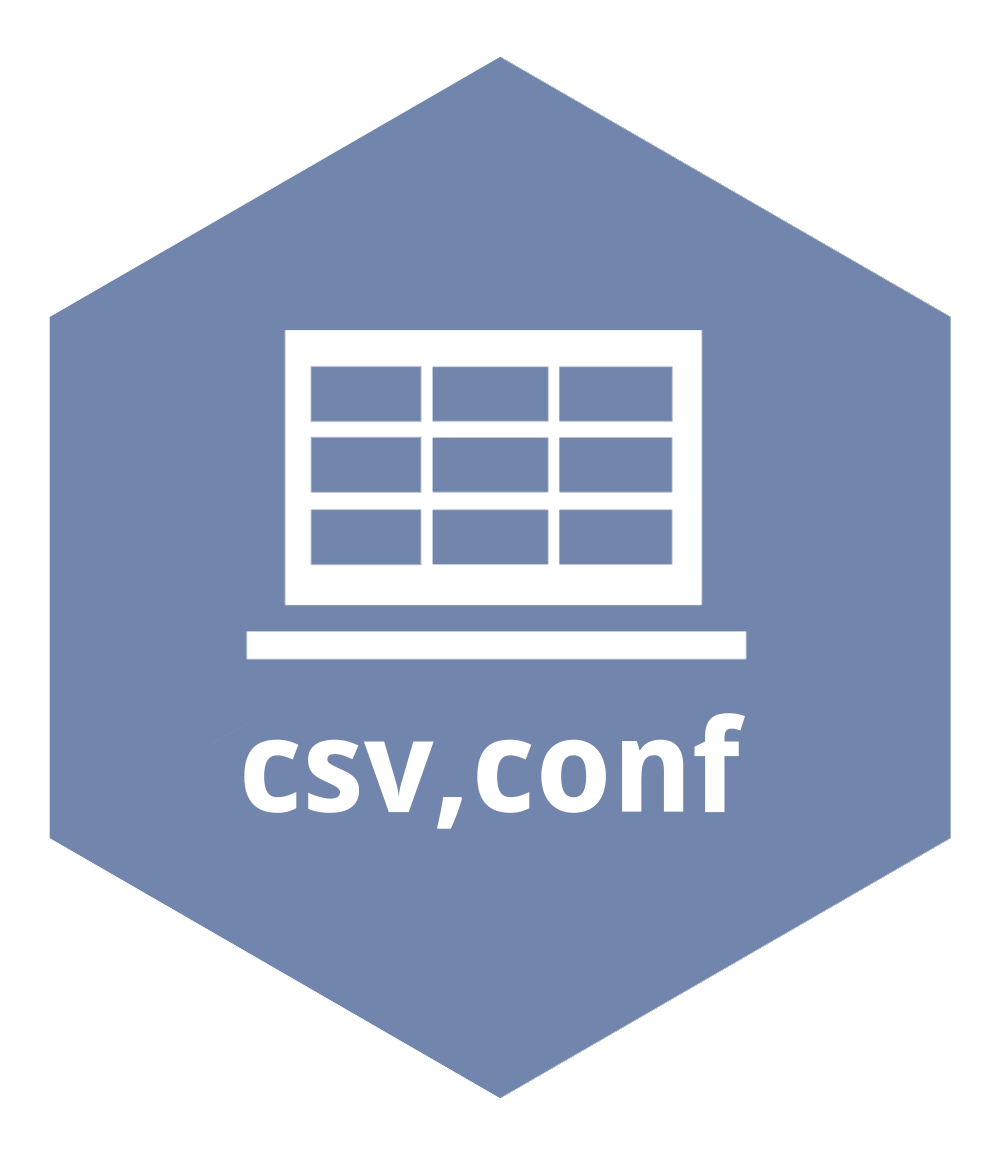
<style>
.page{position:relative;width:1000px;height:1155px;background:#7285ac}
.page>*{position:absolute;margin:0}
.t1{font:128.7px "DroidSans-Bold";color:#ffffff}
</style>
<div class="page">
<p class="t1" style="left:244px;top:713px;width:501px;height:116px">csv,conf</p>
</div>
